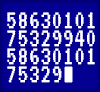
<style>
.page{position:relative;width:100px;height:92px;background:#030092}
.page>*{position:absolute;margin:0}
.t1{font:27px/18px "VT323-Regular";letter-spacing:0.005em;color:#ffffff}
</style>
<div class="page">
<p class="t1" style="left:7px;top:12px;width:88px;height:71px">58630101<br>75329940<br>58630101<br>75329</p>
</div>
